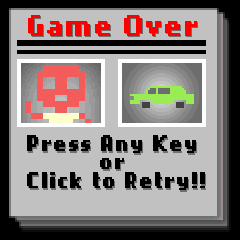
<style>
.page{position:relative;width:240px;height:240px;background:#c1c1c1}
.page>*{position:absolute;margin:0}
.t1{font:24px "NokiaCellphoneFC-Small";letter-spacing:0.05em;color:#ff0000}
.t2{font:18px/18px "NokiaCellphoneFC-Small";letter-spacing:0.05em;color:#000000}
.t3{font:18px/18px "NokiaCellphoneFC-Small";letter-spacing:0.05em}
.t4{font:18px "NokiaCellphoneFC-Small";letter-spacing:0.05em;color:#000000}
.t5{font:18px "NokiaCellphoneFC-Small";letter-spacing:0.05em}
</style>
<div class="page">
<p class="t1" style="left:28px;top:15px;width:169px;height:21px">Game Over</p>
<p class="t1" style="left:29px;top:16px;width:169px;height:21px">Game Over</p>
<p class="t2" style="left:27px;top:135px;width:169px;height:34px;text-align:center">Press Any Key<br>or</p>
<p class="t3" style="left:28px;top:137px;width:169px;height:34px;text-align:center">Press Any Key<br>or</p>
<p class="t4" style="left:27px;top:172px;width:178px;height:18px">Click to Retry!!</p>
<p class="t5" style="left:28px;top:174px;width:178px;height:18px">Click to Retry!!</p>
</div>
